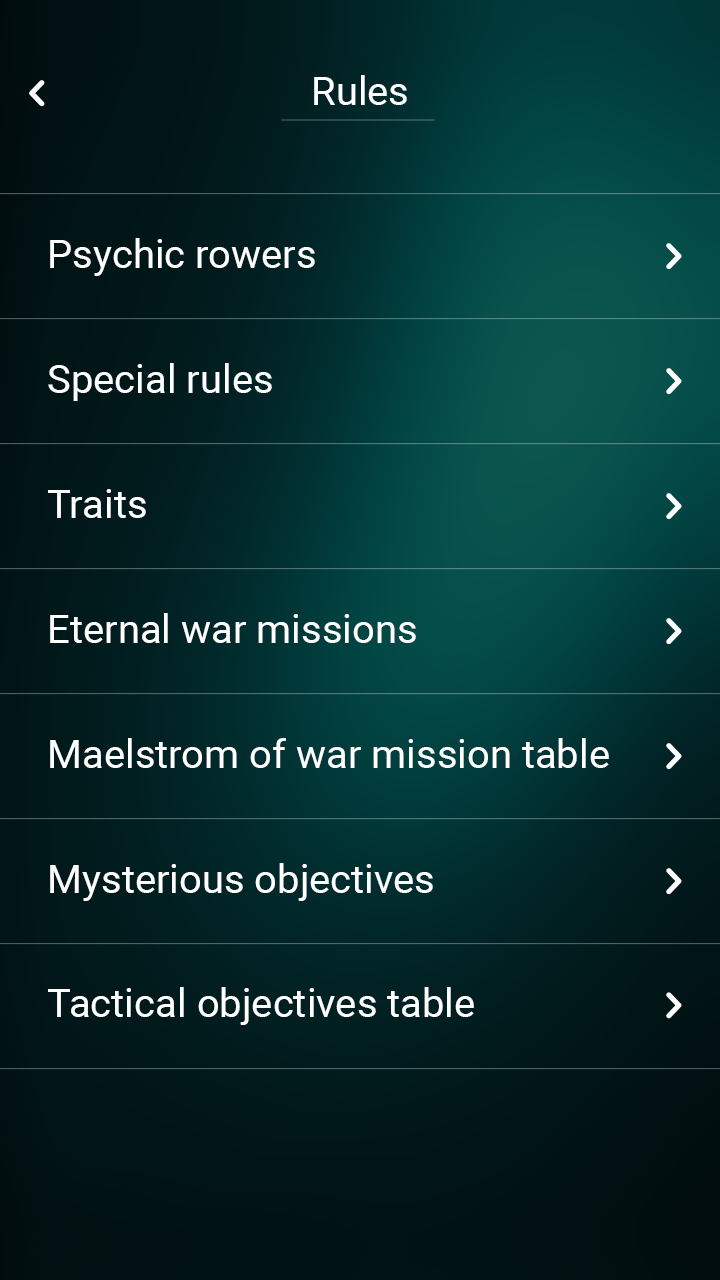
<style>
.page{position:relative;width:720px;height:1280px}
.page>*{position:absolute;margin:0}
.t1{font:40px "Roboto-Regular";color:#ffffff}
</style>
<div class="page">
<p class="t1" style="left:314px;top:75px;width:93px;height:30px">Rules</p>
<p class="t1" style="left:50px;top:238px;width:265px;height:38px">Psychic rowers</p>
<p class="t1" style="left:48px;top:363px;width:224px;height:38px">Special rules</p>
<p class="t1" style="left:48px;top:489px;width:98px;height:29px">Traits</p>
<p class="t1" style="left:50px;top:613px;width:366px;height:30px">Eternal war missions</p>
<p class="t1" style="left:50px;top:738px;width:559px;height:30px">Maelstrom of war mission table</p>
<p class="t1" style="left:50px;top:863px;width:383px;height:38px">Mysterious objectives</p>
<p class="t1" style="left:48px;top:987px;width:426px;height:38px">Tactical objectives table</p>
</div>
